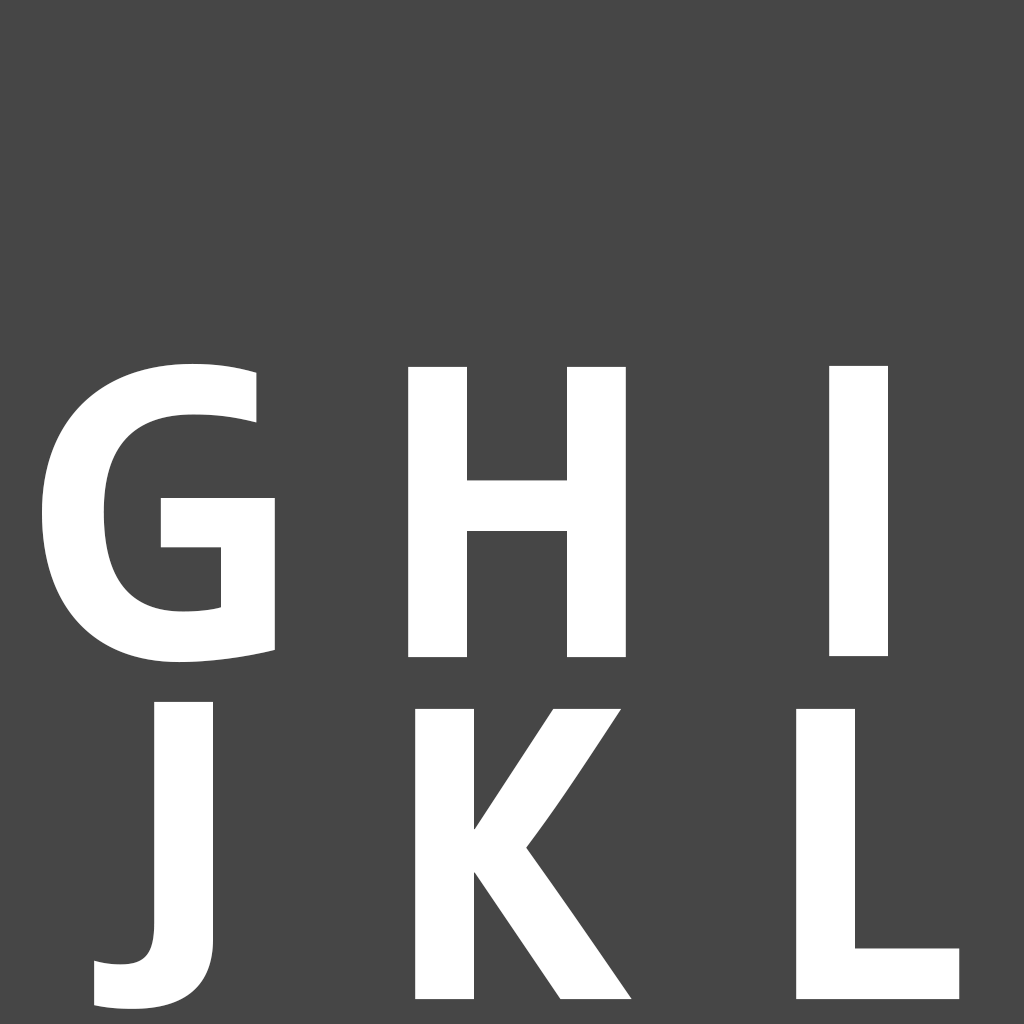
<style>
.page{position:relative;width:1024px;height:1024px;background:#464646}
.page>*{position:absolute;margin:0}
.t1{font:420px "SemikolonPlus-Bold";color:#ffffff}
.t2{font:369.5px "SemikolonPlus-Bold";color:#ffffff;scale:1.14 1}
</style>
<div class="page">
<p class="t1" style="left:42px;top:363px;width:233px;height:300px">G</p>
<p class="t1" style="left:408px;top:366px;width:218px;height:292px">H</p>
<p class="t1" style="left:829px;top:365px;width:59px;height:292px">I</p>
<p class="t2" style="left:94px;top:701px;width:119px;height:308px">J</p>
<p class="t1" style="left:415px;top:708px;width:217px;height:292px">K</p>
<p class="t1" style="left:796px;top:708px;width:164px;height:292px">L</p>
</div>
